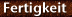
<style>
.page{position:relative;width:72px;height:17px}
.page>*{position:absolute;margin:0}
.t1{font:14px "StoneSansSemITCTTSemi";color:#ffffff}
</style>
<div class="page">
<p class="t1" style="left:4px;top:2px;width:63px;height:14px">Fertigkeit</p>
</div>
